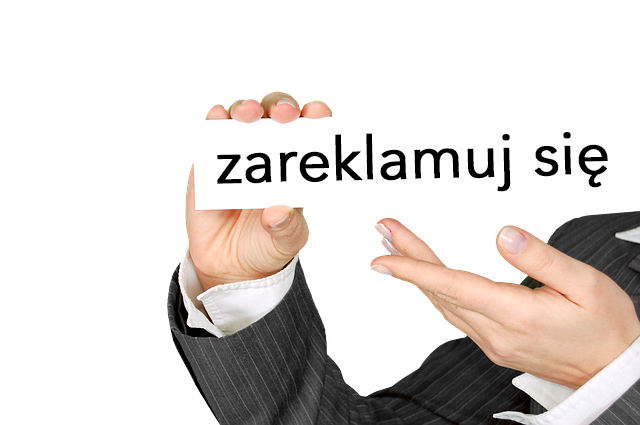
<style>
.page{position:relative;width:640px;height:425px;background:#ffffff}
.page>*{position:absolute;margin:0}
.t1{font:60px "Avenir-Book";color:#000000;font-weight:bold}
</style>
<div class="page">
<p class="t1" style="left:217px;top:132px;width:391px;height:60px;rotate:-1deg">zareklamuj się</p>
</div>
